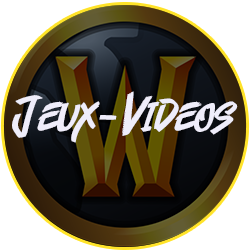
<style>
.page{position:relative;width:250px;height:250px;background:#ffffff}
.page>*{position:absolute;margin:0}
.t1{font:67.9px "CyberthroneRegular";color:#efedfa}
</style>
<div class="page">
<p class="t1" style="left:12px;top:91px;width:226px;height:52px">Jeux-Videos</p>
</div>
